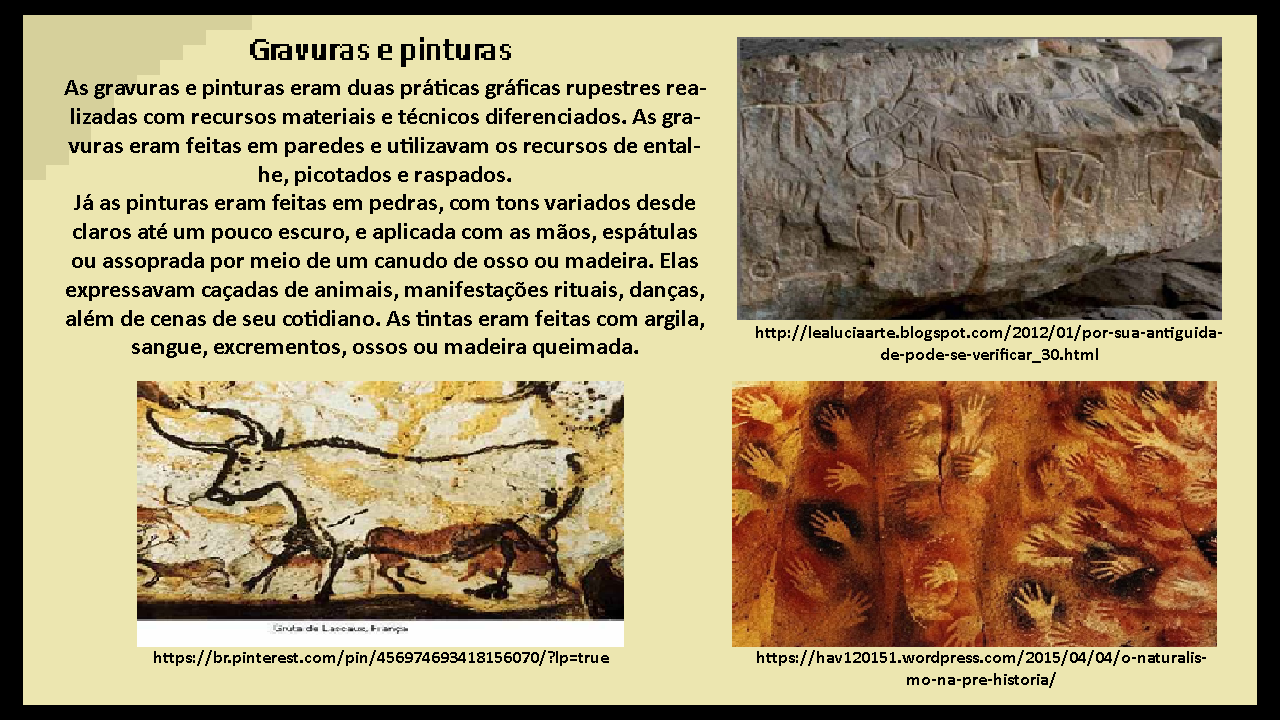
<style>
.page{position:relative;width:1280px;height:720px;background:#ece6b0}
.page>*{position:absolute;margin:0}
.t1{font:24px "Calibri-Bold";color:#000000}
.t2{font:18px "Calibri-Bold";color:#000000}
</style>
<div class="page">
<p class="t1" style="left:64px;top:79px;width:642px;height:279px;text-align:center">As gravuras e pinturas eram duas práticas gráficas rupestres realizadas com recursos materiais e técnicos diferenciados. As gravuras eram feitas em paredes e utilizavam os recursos de entalhe, picotados e raspados.<br>Já as pinturas eram feitas em pedras, com tons variados desde claros até um pouco escuro, e aplicada com as mãos, espátulas ou assoprada por meio de um canudo de osso ou madeira. Elas expressavam caçadas de animais, manifestações rituais, danças, além de cenas de seu cotidiano. As tintas eram feitas com argila, sangue, excrementos, ossos ou madeira queimada.</p>
<p class="t2" style="left:756px;top:325px;width:466px;height:38px;text-align:center">http://lealuciaarte.blogspot.com/2012/01/por-sua-antiguidade-pode-se-verificar_30.html</p>
<p class="t2" style="left:154px;top:650px;width:455px;height:16px">https://br.pinterest.com/pin/456974693418156070/?lp=true</p>
<p class="t2" style="left:757px;top:650px;width:449px;height:38px;text-align:center">https://hav120151.wordpress.com/2015/04/04/o-naturalismo-na-pre-historia/</p>
</div>
